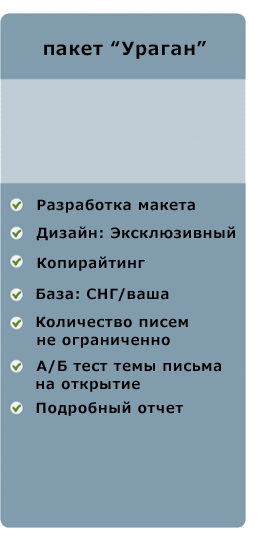
<style>
.page{position:relative;width:260px;height:550px;background:#819cad}
.page>*{position:absolute;margin:0}
.t1{font:18px "Meiryo-Bold";letter-spacing:0.06em;color:#000000;font-variant:small-caps}
.t2{font:14px "Meiryo-Bold";letter-spacing:0.06em;color:#010101;font-variant:small-caps}
.t3{font:14px "Meiryo-Bold";letter-spacing:0.06em;color:#000000;font-variant:small-caps}
</style>
<div class="page">
<p class="t1" style="left:44px;top:41px;width:163px;height:18px">пакет “Ураган”</p>
<p class="t2" style="left:37px;top:199px;width:158px;height:14px">Разработка макета</p>
<p class="t3" style="left:36px;top:226px;width:199px;height:15px">Дизайн: Эксклюзивный</p>
<p class="t3" style="left:37px;top:256px;width:108px;height:15px">Копирайтинг</p>
<p class="t3" style="left:36px;top:288px;width:133px;height:14px">База: СНГ/ваша</p>
<p class="t3" style="left:36px;top:316px;width:152px;height:12px">Количество писем</p>
<p class="t3" style="left:37px;top:336px;width:133px;height:12px">не ограниченно</p>
<p class="t3" style="left:36px;top:360px;width:185px;height:14px">А/Б тест темы письма</p>
<p class="t3" style="left:36px;top:380px;width:104px;height:12px">на открытие</p>
<p class="t3" style="left:36px;top:401px;width:147px;height:15px">Подробный отчет</p>
</div>
